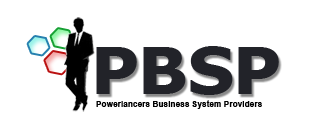
<style>
.page{position:relative;width:318px;height:132px;background:#ffffff}
.page>*{position:absolute;margin:0}
.t1{font:65.5px "Tahoma-Bold";color:#222329;scale:1.1 1}
.t2{font:8.3px "Arial-BoldMT";color:#000000}
</style>
<div class="page">
<p class="t1" style="left:96px;top:46px;width:183px;height:49px">PBSP</p>
<p class="t2" style="left:96px;top:100px;width:166px;height:9px">Powerlancers Business System Providers</p>
</div>
